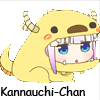
<style>
.page{position:relative;width:100px;height:100px;background:#ffffff}
.page>*{position:absolute;margin:0}
.t1{font:11.8px "ComicSansMS";color:#000000}
</style>
<div class="page">
<p class="t1" style="left:1px;top:86px;width:84px;height:10px">Kannauchi-Chan</p>
</div>
